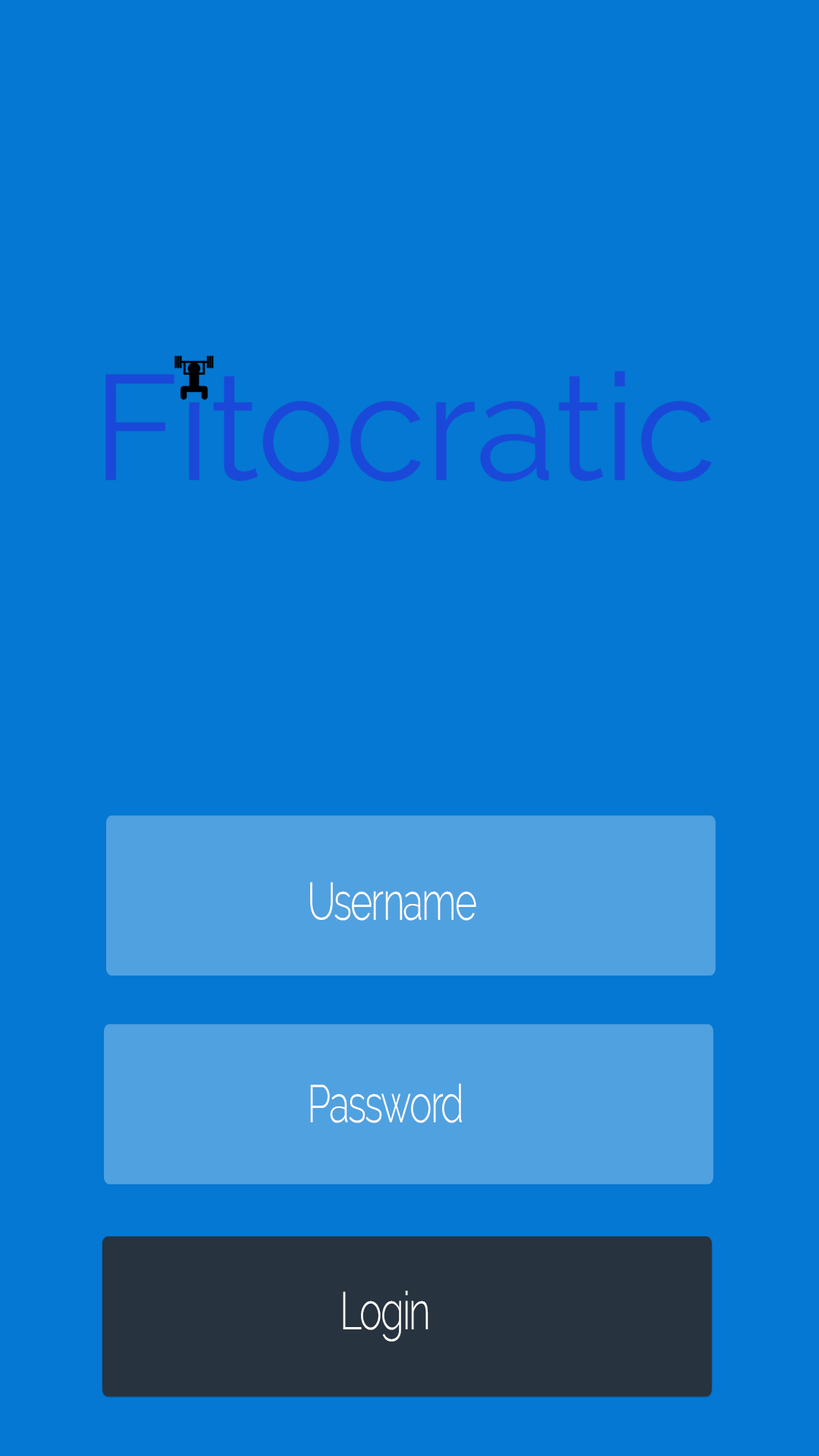
<style>
.page{position:relative;width:819px;height:1456px;background:#0478d2}
.page>*{position:absolute;margin:0}
.t1{font:52.1px "Raleway-Light";letter-spacing:-0.04em;color:#ffffff;scale:0.73 1}
</style>
<div class="page">
<p class="t1" style="left:310px;top:882px;width:166px;height:39px">Username</p>
<p class="t1" style="left:310px;top:1084px;width:152px;height:39px">Password</p>
<p class="t1" style="left:343px;top:1291px;width:85px;height:50px">Login</p>
</div>
